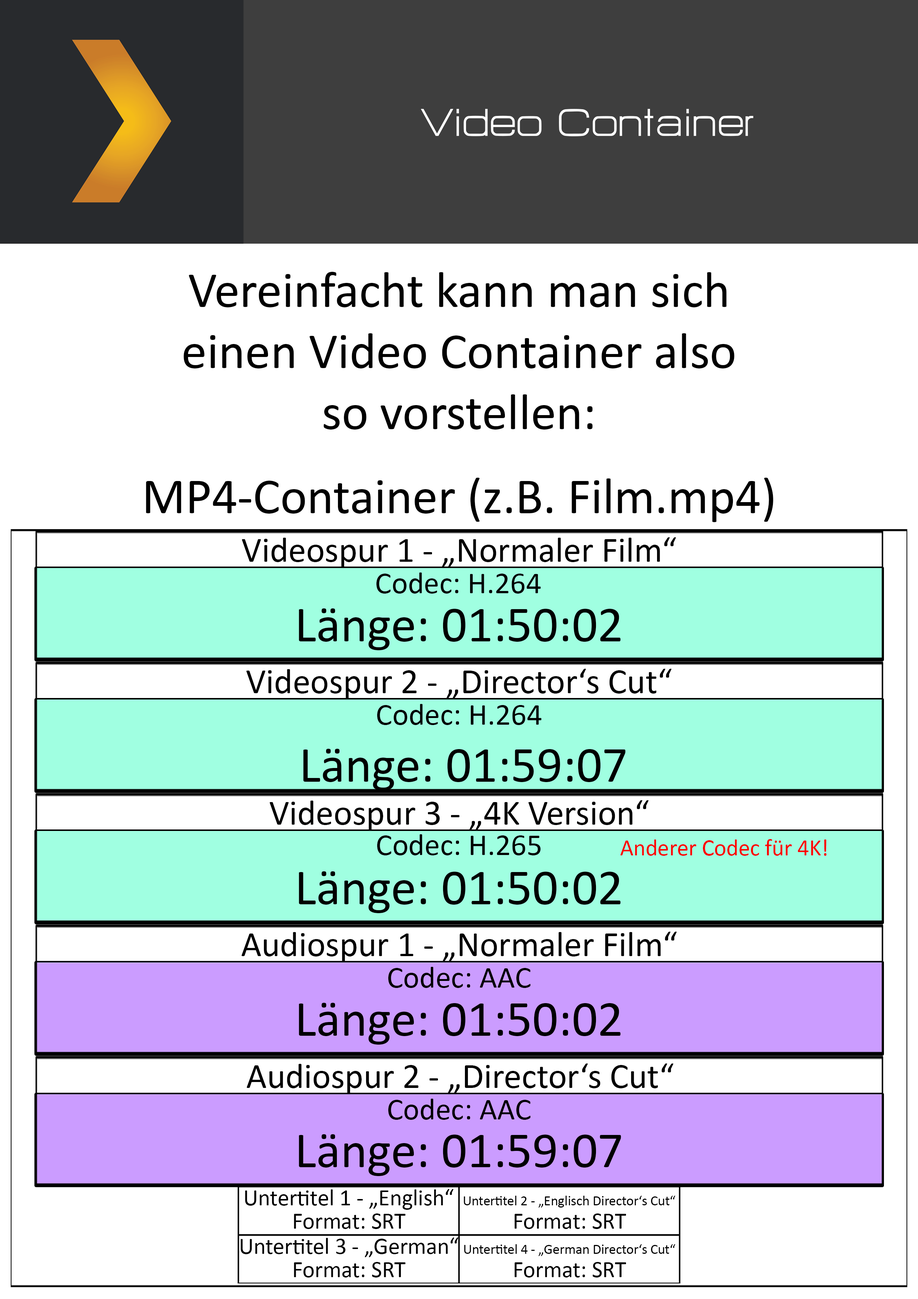
<style>
.page{position:relative;width:918px;height:1299px;background:#ffffff}
.page>*{position:absolute;margin:0}
.t1{font:47.8px "HURTMOLDPersonalUse-Regular";color:#ffffff}
.t2{font:50.9px "Calibri";color:#000000}
.t3{font:35.5px "Calibri";color:#000000}
.t4{font:30.9px "Calibri";color:#000000}
.t5{font:23.1px "Calibri";color:#ff0000}
.t6{font:23.1px "Calibri";color:#000000}
.t7{font:13.9px "Calibri";color:#000000}
</style>
<div class="page">
<p class="t1" style="left:421px;top:109px;width:332px;height:27px">Video Container</p>
<p class="t2" style="left:184px;top:272px;width:551px;height:157px;text-align:center">Vereinfacht kann man sich<br>einen Video Container also<br>so vorstellen:</p>
<p class="t2" style="left:146px;top:478px;width:627px;height:44px">MP4-Container (z.B. Film.mp4)</p>
<p class="t3" style="left:242px;top:537px;width:434px;height:31px">Videospur 1 - „Normaler Film“</p>
<p class="t4" style="left:377px;top:572px;width:164px;height:21px">Codec: H.264</p>
<p class="t2" style="left:299px;top:608px;width:322px;height:42px">Länge: 01:50:02</p>
<p class="t3" style="left:246px;top:669px;width:426px;height:30px">Videospur 2 - „Director‘s Cut“</p>
<p class="t4" style="left:377px;top:704px;width:165px;height:21px">Codec: H.264</p>
<p class="t2" style="left:303px;top:749px;width:323px;height:41px">Länge: 01:59:07</p>
<p class="t3" style="left:270px;top:800px;width:379px;height:31px">Videospur 3 - „4K Version“</p>
<p class="t4" style="left:377px;top:834px;width:164px;height:21px">Codec: H.265</p>
<p class="t5" style="left:620px;top:839px;width:207px;height:17px">Anderer Codec für 4K!</p>
<p class="t2" style="left:299px;top:871px;width:322px;height:42px">Länge: 01:50:02</p>
<p class="t3" style="left:241px;top:931px;width:436px;height:31px">Audiospur 1 - „Normaler Film“</p>
<p class="t4" style="left:388px;top:967px;width:143px;height:21px">Codec: AAC</p>
<p class="t2" style="left:299px;top:1003px;width:322px;height:41px">Länge: 01:50:02</p>
<p class="t3" style="left:247px;top:1063px;width:427px;height:31px">Audiospur 2 - „Director‘s Cut“</p>
<p class="t4" style="left:388px;top:1098px;width:143px;height:22px">Codec: AAC</p>
<p class="t2" style="left:299px;top:1134px;width:322px;height:42px">Länge: 01:59:07</p>
<p class="t6" style="left:245px;top:1189px;width:209px;height:21px">Untertitel 1 - „English“</p>
<p class="t7" style="left:464px;top:1195px;width:212px;height:12px">Untertitel 2 - „Englisch Director‘s Cut“</p>
<p class="t6" style="left:294px;top:1213px;width:112px;height:16px">Format: SRT</p>
<p class="t6" style="left:515px;top:1213px;width:111px;height:16px">Format: SRT</p>
<p class="t6" style="left:241px;top:1237px;width:217px;height:20px">Untertitel 3 - „German“</p>
<p class="t7" style="left:464px;top:1244px;width:212px;height:12px">Untertitel 4 - „German Director‘s Cut“</p>
<p class="t6" style="left:294px;top:1262px;width:112px;height:15px">Format: SRT</p>
<p class="t6" style="left:515px;top:1262px;width:111px;height:15px">Format: SRT</p>
</div>
